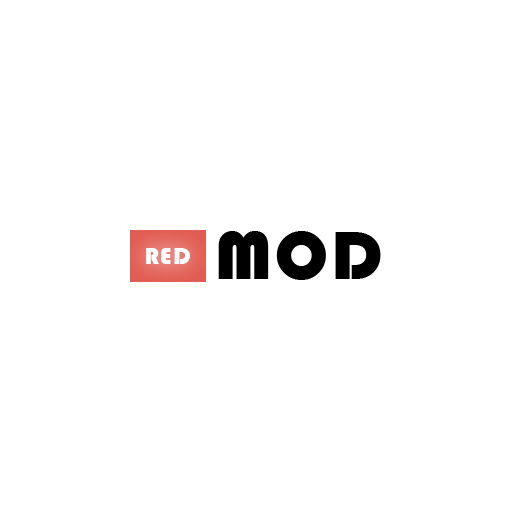
<style>
.page{position:relative;width:512px;height:512px;background:#ffffff}
.page>*{position:absolute;margin:0}
.t1{font:69.8px "Bauhaus93";letter-spacing:0.05em;color:#000000}
.t2{font:24px "Bauhaus93";letter-spacing:0.05em;color:#ffffff}
</style>
<div class="page">
<p class="t1" style="left:218px;top:231px;width:163px;height:49px">MOD</p>
<p class="t2" style="left:146px;top:248px;width:44px;height:16px">RED</p>
</div>
